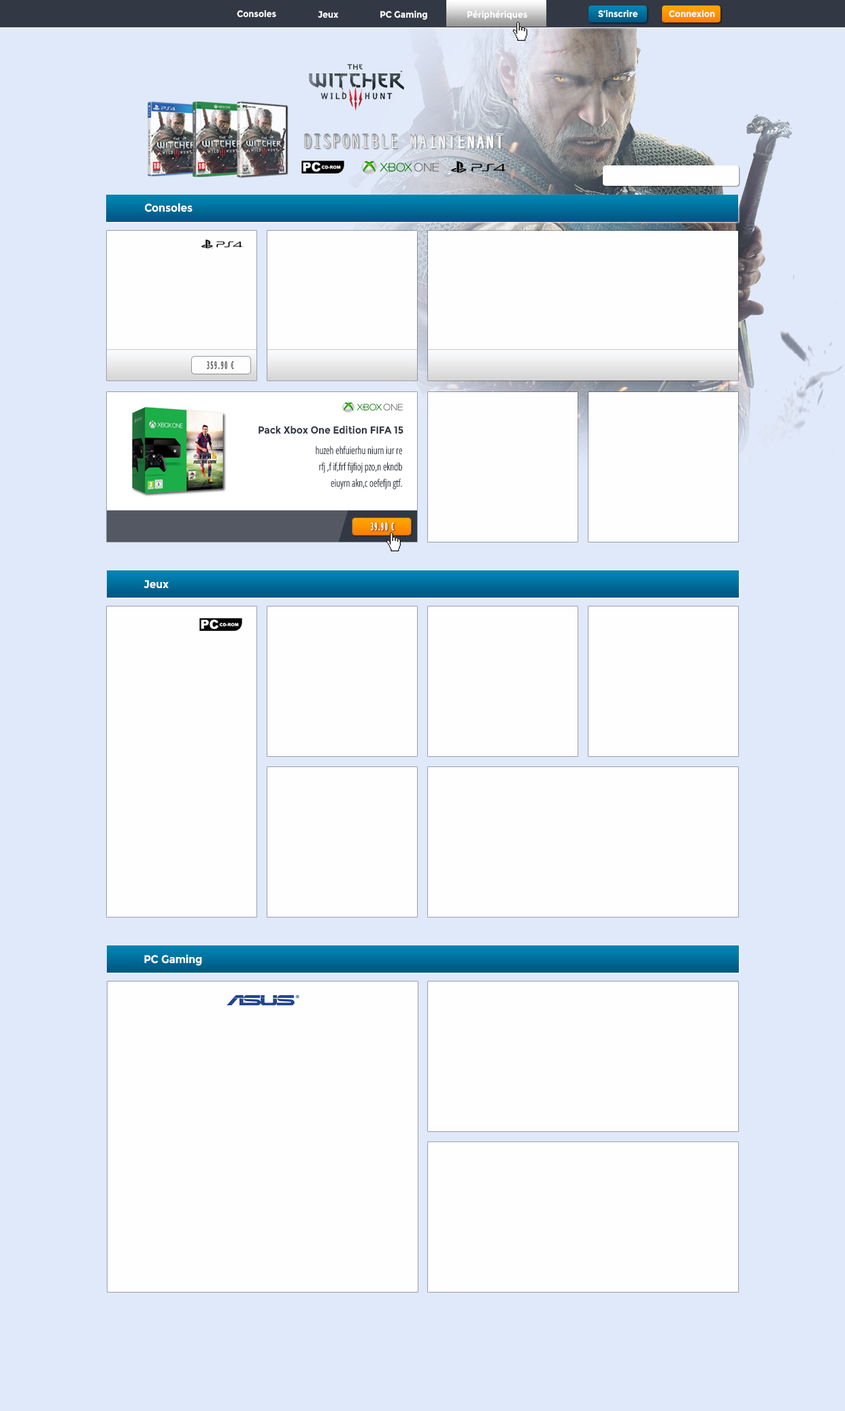
<style>
.page{position:relative;width:845px;height:1411px;background:#e0e9f9}
.page>*{position:absolute;margin:0}
.t1{font:9.2px "Montserrat-Bold";color:#fefefe;scale:0.93 1}
.t2{font:11.2px "Montserrat-Bold";color:#fefefe;scale:0.93 1}
.t3{font:10.6px "OpenSans-CondensedBold";letter-spacing:0.2em;color:#5f5d5d;scale:0.54 1}
.t4{font:10.2px "Montserrat-Bold";color:#323844;scale:0.93 1}
.t5{font:10.2px "OpenSans-CondensedLight";color:#323844;scale:0.93 1}
.t6{font:10.6px "OpenSans-CondensedBold";letter-spacing:0.2em;color:#ffffff;scale:0.54 1}
</style>
<div class="page">
<p class="t1" style="left:237px;top:10px;width:39px;height:8px">Consoles</p>
<p class="t1" style="left:318px;top:11px;width:21px;height:7px">Jeux</p>
<p class="t1" style="left:380px;top:10px;width:47px;height:10px">PC Gaming</p>
<p class="t1" style="left:468px;top:10px;width:59px;height:10px">Périphériques</p>
<p class="t1" style="left:598px;top:10px;width:40px;height:8px">S’inscrire</p>
<p class="t1" style="left:669px;top:10px;width:46px;height:8px">Connexion</p>
<p class="t2" style="left:145px;top:203px;width:48px;height:9px">Consoles</p>
<p class="t3" style="left:207px;top:361px;width:27px;height:9px">359.90 €</p>
<p class="t4" style="left:259px;top:425px;width:145px;height:9px">Pack Xbox One Edition FIFA 15</p>
<p class="t5" style="left:316px;top:446px;width:86px;height:43px;text-align:right">huzeh ehfuierhu niurn iur re<br>rfj ,f if,frf fijfioj pzo,n ekndb<br>eiuyrn akn,c oefefjn gtf.</p>
<p class="t6" style="left:371px;top:522px;width:23px;height:9px">39.90 €</p>
<p class="t2" style="left:144px;top:580px;width:25px;height:9px">Jeux</p>
<p class="t2" style="left:144px;top:954px;width:58px;height:12px">PC Gaming</p>
</div>
